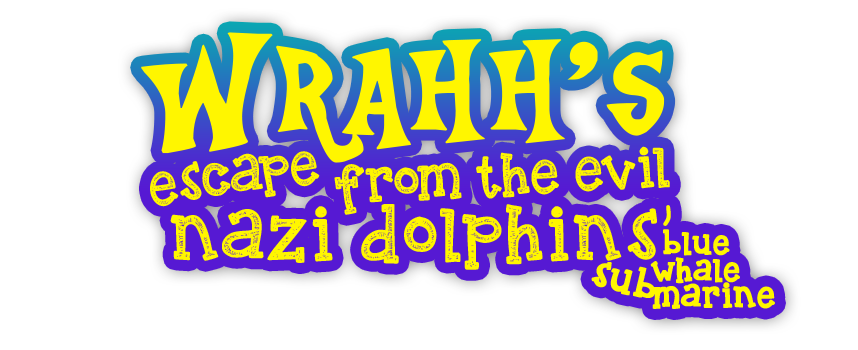
<style>
.page{position:relative;width:858px;height:350px;background:#ffffff}
.page>*{position:absolute;margin:0}
.t1{font:171px "Equestria";color:#fff600}
.t2{font:53px "KBREINDEERGAMES";color:#fff600}
.t3{font:58.5px "KBREINDEERGAMES";color:#fff600}
.t4{font:71px "KBREINDEERGAMES";letter-spacing:0.04em;color:#fff600}
.t5{font:30px/27px "KBREINDEERGAMES";letter-spacing:0.02em;color:#fff600;font-weight:bold}
.t6{font:36.7px "KBREINDEERGAMES";letter-spacing:0.02em;color:#fff600;font-weight:bold}
.t7{font:32.5px "KBREINDEERGAMES";letter-spacing:0.02em;color:#fff600;font-weight:bold}
</style>
<div class="page">
<p class="t1" style="left:141px;top:32px;width:524px;height:131px">Wrahh’s</p>
<p class="t2" style="left:365px;top:146px;width:305px;height:57px;rotate:-3deg">rom the evil</p>
<p class="t2" style="left:150px;top:151px;width:170px;height:56px;rotate:-8deg">escape</p>
<p class="t3" style="left:334px;top:164px;width:30px;height:51px;rotate:-6deg">f</p>
<p class="t4" style="left:170px;top:204px;width:501px;height:66px">nazi dolphins’</p>
<p class="t5" style="left:650px;top:229px;width:90px;height:55px;text-align:center">blue<br>whale</p>
<p class="t6" style="left:591px;top:262px;width:65px;height:36px;rotate:14deg">sub</p>
<p class="t7" style="left:652px;top:282px;width:123px;height:27px">marine</p>
</div>
